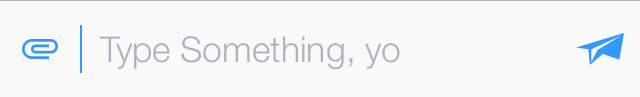
<style>
.page{position:relative;width:640px;height:97px;background:#f9f9f9}
.page>*{position:absolute;margin:0}
.t1{font:35.6px "HelveticaNeue-Light";color:#acb2bf}
</style>
<div class="page">
<p class="t1" style="left:99px;top:36px;width:301px;height:34px">Type Something, yo</p>
</div>
